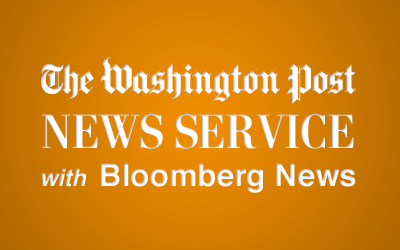
<style>
.page{position:relative;width:400px;height:250px}
.page>*{position:absolute;margin:0}
.t1{font:48.4px "Postoni-Bold";letter-spacing:0.01em;color:#ffffff}
.t2{font:24px "Helvetica-BoldOblique";letter-spacing:0.01em}
.t3{font:31px "Helvetica-Bold";letter-spacing:0.01em;color:#ffffff}
</style>
<div class="page">
<p class="t1" style="left:41px;top:113px;width:313px;height:36px">NEWS SERVICE</p>
<p class="t2" style="left:42px;top:168px;width:45px;height:19px">with</p>
<p class="t3" style="left:101px;top:163px;width:255px;height:30px">Bloomberg News</p>
</div>
